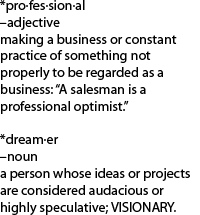
<style>
.page{position:relative;width:200px;height:215px;background:#ffffff}
.page>*{position:absolute;margin:0}
.t1{font:14px "MyriadPro-Regular";color:#000000}
</style>
<div class="page">
<p class="t1" style="left:0px;top:0px;width:190px;height:215px">*pro·fes·sion·al<br>–adjective<br>making a business or constant<br>practice of something not<br>properly to be regarded as a <br>business: “A salesman is a <br>professional optimist.” <br><br>*dream·er<br>–noun<br>a person whose ideas or projects <br>are considered audacious or <br>highly speculative; VISIONARY.</p>
</div>
